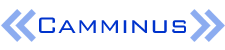
<style>
.page{position:relative;width:225px;height:50px;background:#ffffff}
.page>*{position:absolute;margin:0}
.t1{font:30px "BankGothic-Light";color:#0033cc}
</style>
<div class="page">
<p class="t1" style="left:39px;top:17px;width:147px;height:16px">Camminus</p>
</div>
